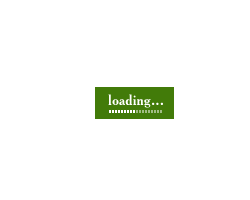
<style>
.page{position:relative;width:250px;height:200px;background:#ffffff}
.page>*{position:absolute;margin:0}
.t1{font:15px "Academy-Bold";color:#ffffff}
</style>
<div class="page">
<p class="t1" style="left:108px;top:94px;width:55px;height:14px">loading...</p>
</div>
